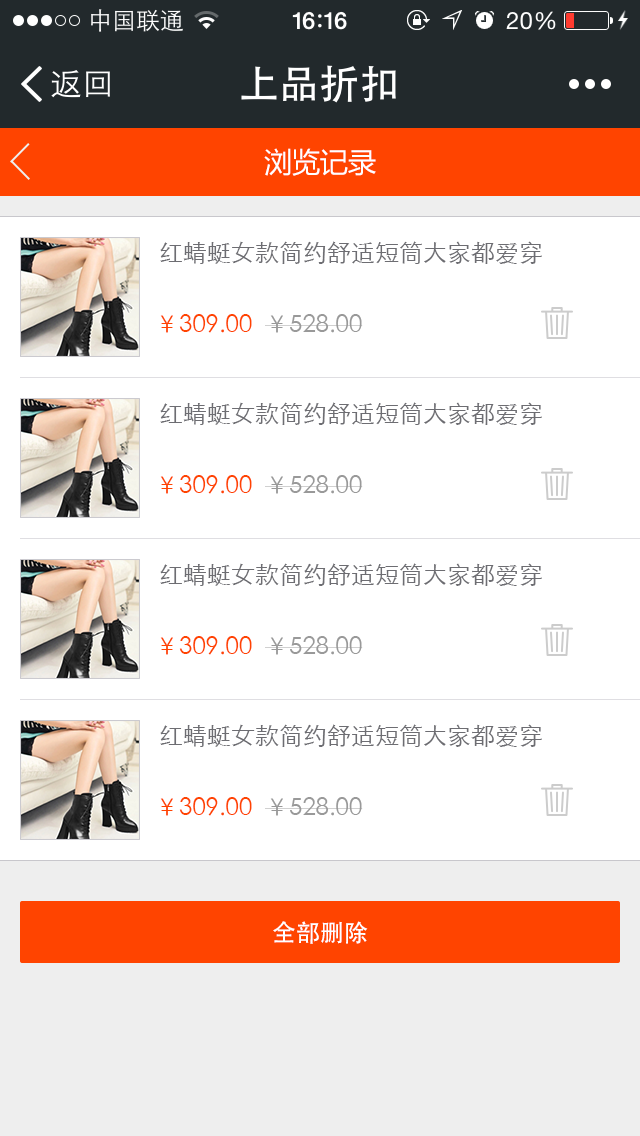
<style>
.page{position:relative;width:640px;height:1136px;background:#ffffff}
.page>*{position:absolute;margin:0}
.t1{font:28px "MicrosoftYaHei";color:#ffffff}
.t2{font:24px "STXihei";color:#6d6d72}
.t3{font:24px "STXihei";color:#ff4400}
.t4{font:24px "STXihei";color:#999999}
.t5{font:24px "STHeiti";color:#ffffff}
</style>
<div class="page">
<p class="t1" style="left:264px;top:148px;width:112px;height:28px">浏览记录</p>
<p class="t2" style="left:160px;top:241px;width:382px;height:23px">红蜻蜓女款简约舒适短筒大家都爱穿</p>
<p class="t3" style="left:160px;top:314px;width:92px;height:19px">￥309.00</p>
<p class="t4" style="left:265px;top:314px;width:98px;height:19px">￥528.00</p>
<p class="t2" style="left:160px;top:402px;width:382px;height:23px">红蜻蜓女款简约舒适短筒大家都爱穿</p>
<p class="t3" style="left:160px;top:475px;width:92px;height:19px">￥309.00</p>
<p class="t4" style="left:265px;top:475px;width:98px;height:19px">￥528.00</p>
<p class="t2" style="left:160px;top:563px;width:382px;height:23px">红蜻蜓女款简约舒适短筒大家都爱穿</p>
<p class="t3" style="left:160px;top:636px;width:92px;height:19px">￥309.00</p>
<p class="t4" style="left:265px;top:636px;width:98px;height:19px">￥528.00</p>
<p class="t2" style="left:160px;top:724px;width:382px;height:23px">红蜻蜓女款简约舒适短筒大家都爱穿</p>
<p class="t3" style="left:160px;top:797px;width:92px;height:19px">￥309.00</p>
<p class="t4" style="left:265px;top:797px;width:98px;height:19px">￥528.00</p>
<p class="t5" style="left:273px;top:921px;width:95px;height:23px">全部删除</p>
</div>
